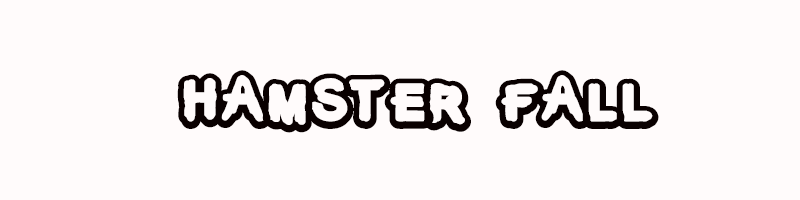
<style>
.page{position:relative;width:800px;height:200px;background:#fffbfb}
.page>*{position:absolute;margin:0}
.t1{font:85px "The-Kids-Mraker-Regular";color:#090000}
</style>
<div class="page">
<p class="t1" style="left:177px;top:70px;width:482px;height:63px">hamster fall</p>
</div>
